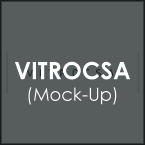
<style>
.page{position:relative;width:145px;height:145px;background:#575c5d}
.page>*{position:absolute;margin:0}
.t1{font:18px "CenturyGothic";color:#ffffff}
.t2{font:24px "CenturyGothic-Bold";color:#ffffff}
</style>
<div class="page">
<p class="t1" style="left:15px;top:61px;width:115px;height:44px;text-align:center"><span class="t2">VITROCSA<br></span>(Mock-Up)</p>
</div>
